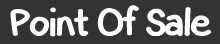
<style>
.page{position:relative;width:220px;height:44px;background:#333333}
.page>*{position:absolute;margin:0}
.t1{font:43.8px "SmartKid";letter-spacing:-0.05em;color:#ffffff;font-weight:bold}
</style>
<div class="page">
<p class="t1" style="left:10px;top:5px;width:202px;height:32px">Point Of Sale</p>
</div>
